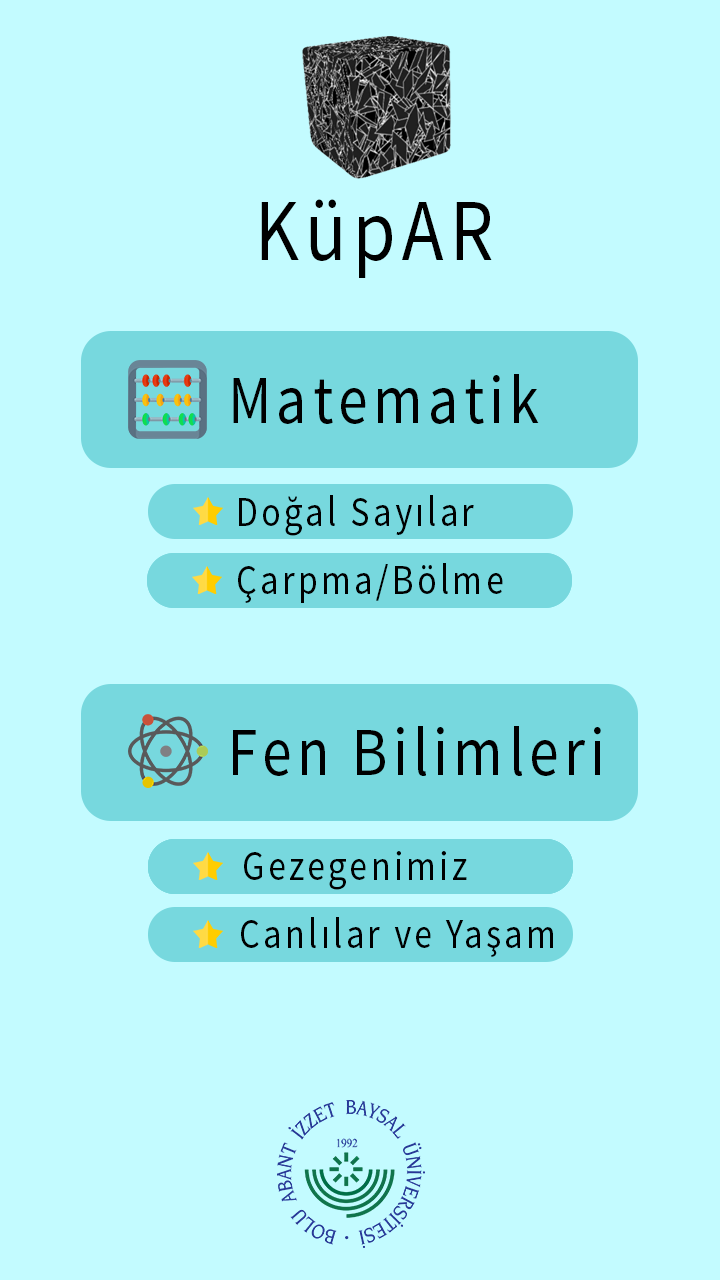
<style>
.page{position:relative;width:720px;height:1280px;background:#c3fbff}
.page>*{position:absolute;margin:0}
.t1{font:88px "SourceSansPro-Regular";letter-spacing:0.089em;color:#000000;scale:0.87 1}
.t2{font:69px "SourceSansPro-Regular";letter-spacing:0.089em;color:#000000;scale:0.87 1}
.t3{font:42.2px "SourceSansPro-Regular";letter-spacing:0.089em;color:#000000;scale:0.86 1}
</style>
<div class="page">
<p class="t1" style="left:261px;top:199px;width:231px;height:79px">KüpAR</p>
<p class="t2" style="left:233px;top:374px;width:306px;height:50px">Matematik</p>
<p class="t3" style="left:239px;top:495px;width:235px;height:41px">Doğal Sayılar</p>
<p class="t3" style="left:238px;top:563px;width:265px;height:40px">Çarpma/Bölme</p>
<p class="t2" style="left:233px;top:726px;width:368px;height:50px">Fen Bilimleri</p>
<p class="t3" style="left:244px;top:851px;width:223px;height:39px">Gezegenimiz</p>
<p class="t3" style="left:241px;top:917px;width:312px;height:40px">Canlılar ve Yaşam</p>
</div>
